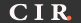
<style>
.page{position:relative;width:81px;height:23px;background:#333333}
.page>*{position:absolute;margin:0}
.t1{font:23.8px "MinionPro-Bold";color:#fcf6f6;scale:1.18 1}
</style>
<div class="page">
<p class="t1" style="left:9px;top:3px;width:60px;height:18px">C I R</p>
</div>
